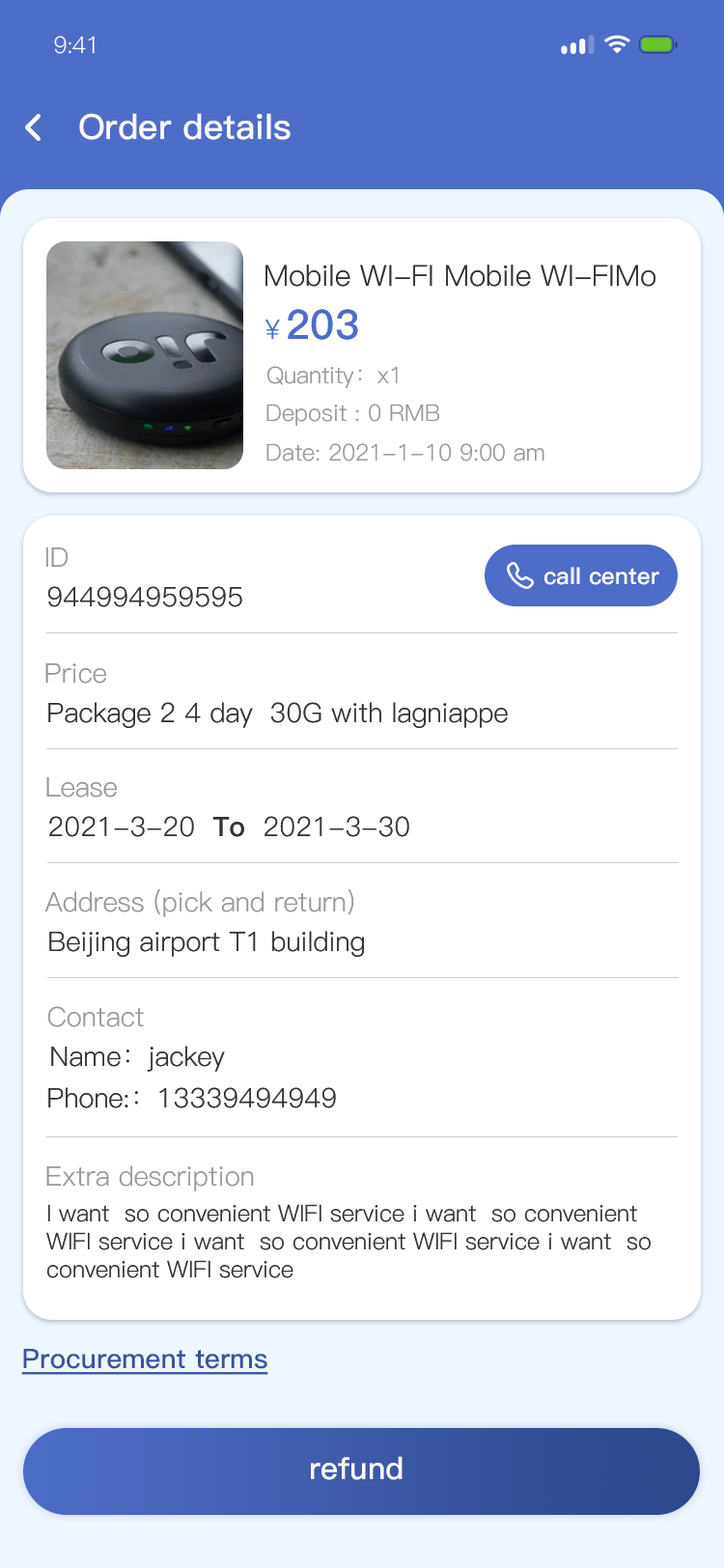
<style>
.page{position:relative;width:724px;height:1568px;background:#ffffff}
.page>*{position:absolute;margin:0}
.t1{font:23.2px "PingFang-SC-Regular";letter-spacing:-0.025em;color:#ffffff}
.t2{font:34.8px "PingFang-SC-Bold";color:#ffffff}
.t3{font:29px "PingFang-SC-Regular";color:#333333}
.t4{font:40.6px "PingFang-SC-Bold";color:#4c6ec8}
.t5{font:27px "PingFang-SC-Regular";color:#4c6ec8}
.t6{font:23.2px "PingFang-SC-Regular";color:#999999}
.t7{font:27px "PingFang-SC-Regular";color:#999999}
.t8{font:23.2px "PingFang-SC-Bold";color:#ffffff}
.t9{font:27px "PingFang-SC-Regular";color:#333333}
.t10{font:27px "PingFang-SC-Bold";color:#333333}
.t11{font:23.2px "PingFang-SC-Regular";color:#333333}
.t12{font:27px "PingFang-SC-Bold";color:#38549f;text-decoration:underline}
.t13{font:30.9px "PingFang-SC-Bold";color:#ffffff}
</style>
<div class="page">
<p class="t1" style="left:54px;top:36px;width:41px;height:18px">9:41</p>
<p class="t2" style="left:79px;top:113px;width:212px;height:27px">Order details</p>
<p class="t3" style="left:266px;top:265px;width:390px;height:22px">Mobile WI-FI Mobile WI-FIMo</p>
<p class="t4" style="left:265px;top:309px;width:93px;height:31px"><span class="t5">￥</span>203</p>
<p class="t6" style="left:267px;top:366px;width:131px;height:22px">Quantity：x1</p>
<p class="t6" style="left:266px;top:404px;width:173px;height:22px">Deposit : 0 RMB</p>
<p class="t6" style="left:266px;top:443px;width:279px;height:19px">Date: 2021-1-10 9:00 am</p>
<p class="t7" style="left:46px;top:547px;width:22px;height:20px">ID</p>
<p class="t8" style="left:545px;top:567px;width:114px;height:18px">call center</p>
<p class="t9" style="left:48px;top:586px;width:194px;height:21px">944994959595</p>
<p class="t7" style="left:45px;top:663px;width:62px;height:21px">Price</p>
<p class="t9" style="left:48px;top:702px;width:460px;height:26px">Package 2 4 day  30G with lagniappe</p>
<p class="t7" style="left:46px;top:777px;width:72px;height:21px">Lease</p>
<p class="t9" style="left:49px;top:816px;width:360px;height:21px">2021-3-20  <span class="t10">To</span>  2021-3-30</p>
<p class="t7" style="left:44px;top:888px;width:310px;height:29px">Address (pick and return)</p>
<p class="t9" style="left:49px;top:931px;width:315px;height:26px">Beijing airport T1 building</p>
<p class="t7" style="left:47px;top:1006px;width:97px;height:21px">Contact</p>
<p class="t9" style="left:51px;top:1046px;width:174px;height:26px">Name：jackey</p>
<p class="t9" style="left:48px;top:1087px;width:288px;height:21px">Phone:：13339494949</p>
<p class="t7" style="left:46px;top:1165px;width:208px;height:26px">Extra description</p>
<p class="t11" style="left:46px;top:1204px;width:605px;height:74px">I want  so convenient WIFI service i want  so convenient WIFI service i want  so convenient WIFI service i want  so convenient WIFI service</p>
<p class="t12" style="left:21px;top:1349px;width:247px;height:26px">Procurement terms</p>
<p class="t13" style="left:311px;top:1456px;width:92px;height:24px">refund</p>
</div>
